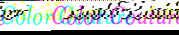
<style>
.page{position:relative;width:179px;height:35px;background:#ffffff}
.page>*{position:absolute;margin:0}
.t1{font:30px "MrsEavesItalic"}
</style>
<div class="page">
<p class="t1" style="left:1px;top:5px;width:132px;height:20px">Color Couture</p>
</div>
